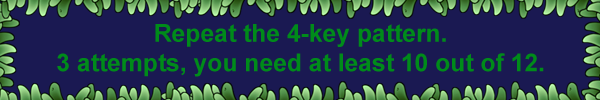
<style>
.page{position:relative;width:600px;height:100px;background:#1a1952}
.page>*{position:absolute;margin:0}
.t1{font:24.7px "Arial-BoldMT";color:#008b1a}
</style>
<div class="page">
<p class="t1" style="left:57px;top:24px;width:487px;height:53px;text-align:center">Repeat the 4-key pattern.<br>3 attempts, you need at least 10 out of 12.</p>
</div>
